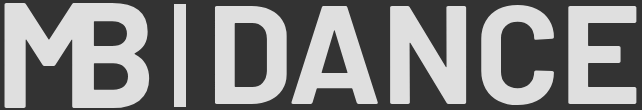
<style>
.page{position:relative;width:642px;height:110px;background:#333333}
.page>*{position:absolute;margin:0}
.t1{font:150px "Barlow-Bold";color:#dfdfdf}
.t2{font:140px "Barlow-Bold";color:#dfdfdf}
</style>
<div class="page">
<p class="t1" style="left:4px;top:3px;width:90px;height:105px">M</p>
<p class="t1" style="left:72px;top:3px;width:78px;height:105px">B</p>
<p class="t2" style="left:214px;top:4px;width:423px;height:102px">DANCE</p>
</div>
